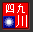
<style>
.page{position:relative;width:33px;height:32px;background:#f20000}
.page>*{position:absolute;margin:0}
.t1{font:10.4px "SimSun";color:#ffffff}
.t2{font:11.7px "SimSun";color:#ffffff}
</style>
<div class="page">
<p class="t1" style="left:6px;top:4px;width:19px;height:9px">四九</p>
<p class="t2" style="left:16px;top:15px;width:11px;height:12px">川</p>
</div>
